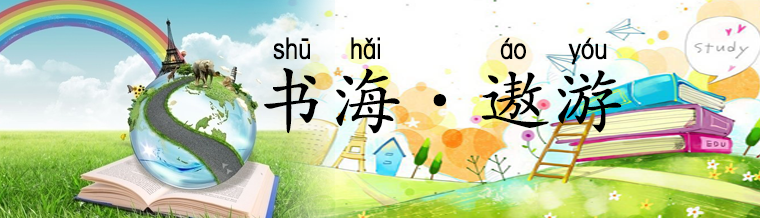
<style>
.page{position:relative;width:760px;height:218px}
.page>*{position:absolute;margin:0}
.t1{font:72px "FZKTPY01--GB1-0";color:#000000;font-weight:bold}
</style>
<div class="page">
<p class="t1" style="left:264px;top:37px;width:358px;height:97px">书海·遨游</p>
</div>
